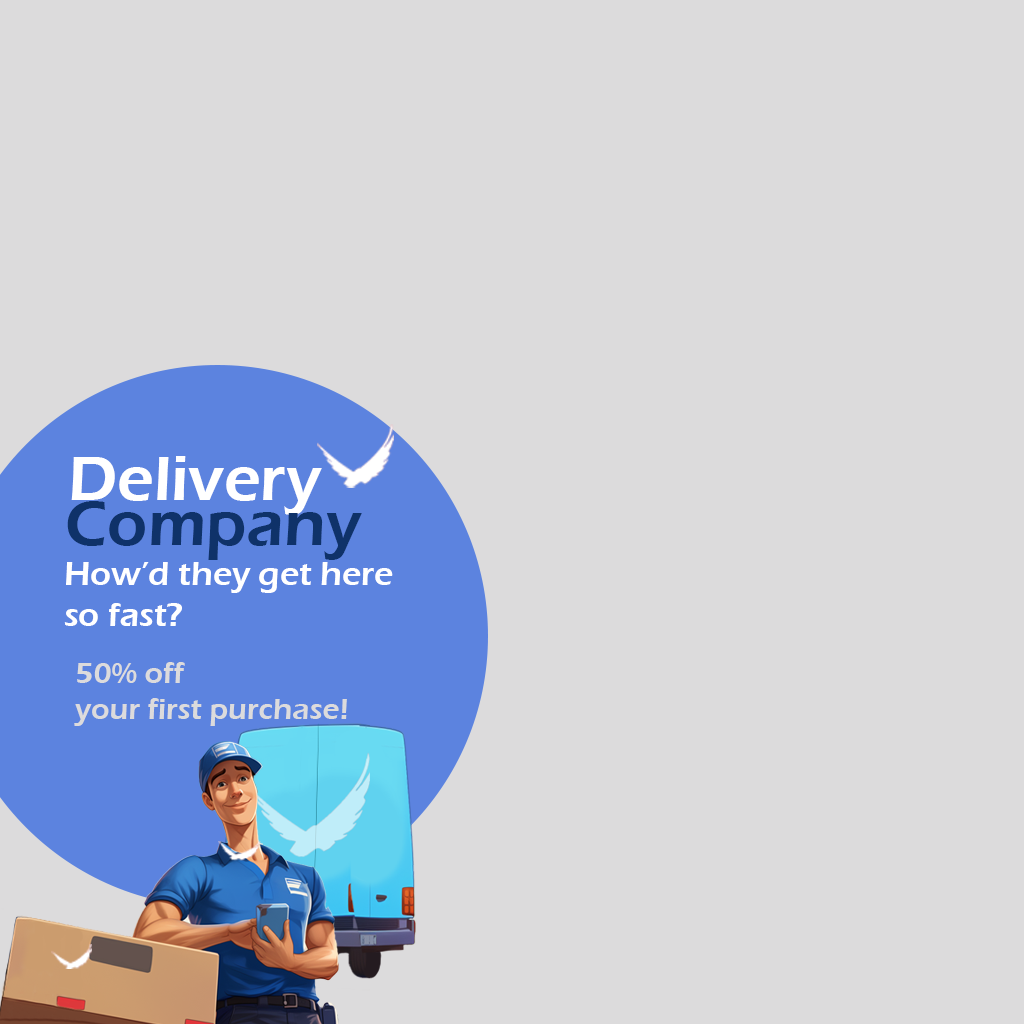
<style>
.page{position:relative;width:1024px;height:1024px;background:#dcdbdc}
.page>*{position:absolute;margin:0}
.t1{font:65.4px "ErasITC-Demi";color:#ffffff}
.t2{font:65.4px "ErasITC-Demi";color:#0f3269}
.t3{font:34px "ErasITC-Demi";color:#ffffff}
.t4{font:30px "ErasITC-Demi";color:#dcdbdc}
</style>
<div class="page">
<p class="t1" style="left:71px;top:456px;width:251px;height:59px">Delivery</p>
<p class="t2" style="left:67px;top:501px;width:295px;height:59px">Company</p>
<p class="t3" style="left:64px;top:562px;width:329px;height:64px">How’d they get here<br>so fast?</p>
<p class="t4" style="left:74px;top:662px;width:273px;height:64px">50% off<br>your first purchase!</p>
</div>
